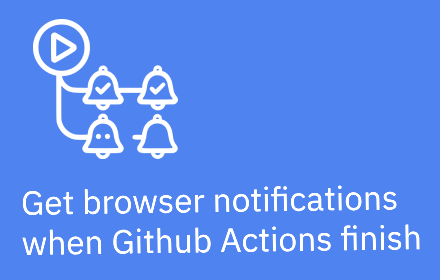
<style>
.page{position:relative;width:440px;height:280px;background:#4f83ef}
.page>*{position:absolute;margin:0}
.t1{font:33.4px "IBMPlexSansThai-Regular";color:#ffffff}
</style>
<div class="page">
<p class="t1" style="left:22px;top:185px;width:398px;height:70px;rotate:-1deg">Get browser notifications<br>when Github Actions finish</p>
</div>
